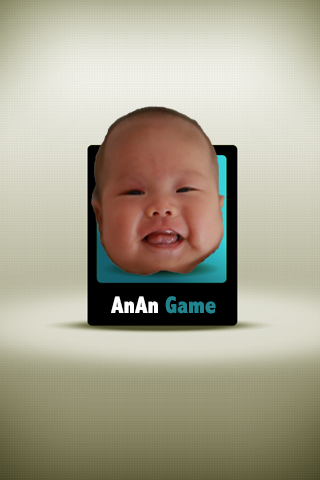
<style>
.page{position:relative;width:320px;height:480px}
.page>*{position:absolute;margin:0}
.t1{font:24px "AbadiMT-CondensedExtraBold";color:#fefdfd}
.t2{font:24px "AbadiMT-CondensedExtraBold";color:#21838d}
</style>
<div class="page">
<p class="t1" style="left:111px;top:296px;width:105px;height:18px">AnAn <span class="t2">Game</span></p>
</div>
